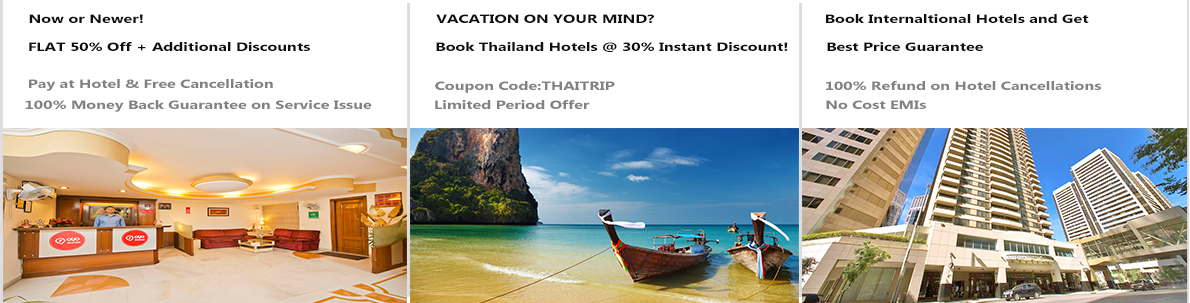
<style>
.page{position:relative;width:1190px;height:303px;background:#ffffff}
.page>*{position:absolute;margin:0}
.t1{font:12px "MicrosoftTaiLe-Bold";color:#0f0f0f;scale:1.35 1}
.t2{font:12px "MicrosoftTaiLe-Bold";color:#0f0f0f;scale:1.34 1}
.t3{font:12px "MicrosoftTaiLe-Bold";color:#818181;scale:1.35 1}
.t4{font:12px "MicrosoftTaiLe-Bold";color:#818181;scale:1.34 1}
</style>
<div class="page">
<p class="t1" style="left:29px;top:14px;width:114px;height:9px">Now or Newer!</p>
<p class="t2" style="left:436px;top:14px;width:218px;height:9px">VACATION ON YOUR MIND?</p>
<p class="t2" style="left:826px;top:14px;width:263px;height:9px">Book Internaltional Hotels and Get</p>
<p class="t1" style="left:29px;top:42px;width:281px;height:9px">FLAT 50% Off + Additional Discounts</p>
<p class="t2" style="left:436px;top:42px;width:352px;height:10px">Book Thailand Hotels @ 30% Instant Discount!</p>
<p class="t2" style="left:827px;top:42px;width:156px;height:9px">Best Price Guarantee</p>
<p class="t3" style="left:29px;top:79px;width:244px;height:12px">Pay at Hotel &amp; Free Cancellation</p>
<p class="t4" style="left:435px;top:81px;width:180px;height:12px">Coupon Code:THAITRIP</p>
<p class="t4" style="left:826px;top:81px;width:275px;height:9px">100% Refund on Hotel Cancellations</p>
<p class="t3" style="left:25px;top:100px;width:347px;height:12px">100% Money Back Guarantee on Service Issue</p>
<p class="t4" style="left:435px;top:100px;width:155px;height:9px">Limited Period Offer</p>
<p class="t4" style="left:826px;top:100px;width:100px;height:9px">No Cost EMIs</p>
</div>
